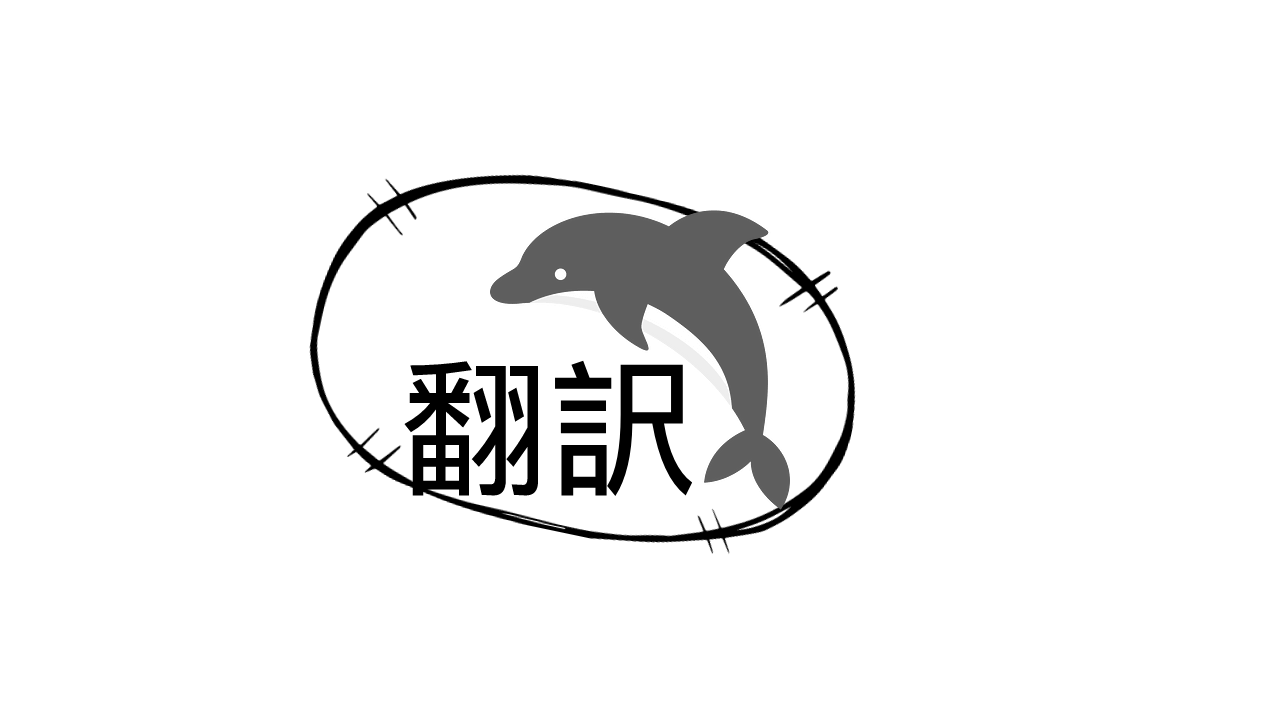
<style>
.page{position:relative;width:1280px;height:720px;background:#ffffff}
.page>*{position:absolute;margin:0}
.t1{font:150px "DroidSansFallback";color:#000000}
</style>
<div class="page">
<p class="t1" style="left:404px;top:360px;width:289px;height:137px">翻訳</p>
</div>
